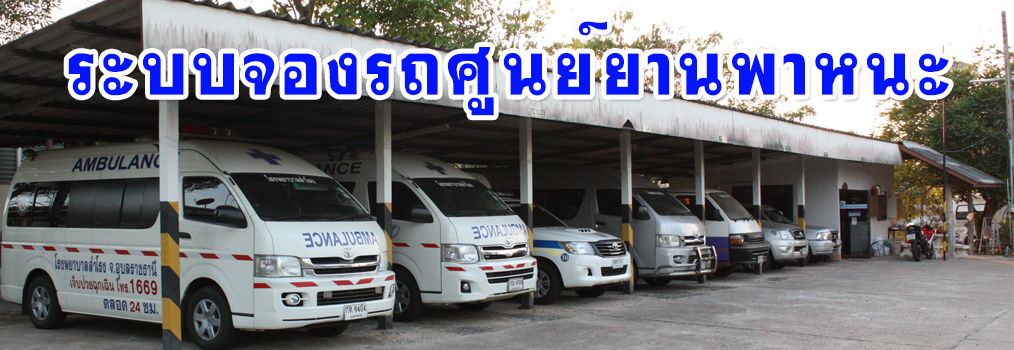
<style>
.page{position:relative;width:1014px;height:350px}
.page>*{position:absolute;margin:0}
.t1{font:100px "DSEMaTiChon";letter-spacing:0.05em;color:#0415fb}
</style>
<div class="page">
<p class="t1" style="left:68px;top:21px;width:881px;height:95px">ระบบจองรถศูนย์ยานพาหนะ</p>
</div>
